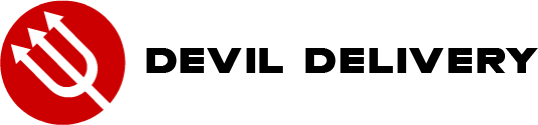
<style>
.page{position:relative;width:538px;height:125px;background:#ffffff}
.page>*{position:absolute;margin:0}
.t1{font:36px "MesaGrande";color:#000000}
</style>
<div class="page">
<p class="t1" style="left:146px;top:48px;width:392px;height:25px">Devil Delivery</p>
</div>
